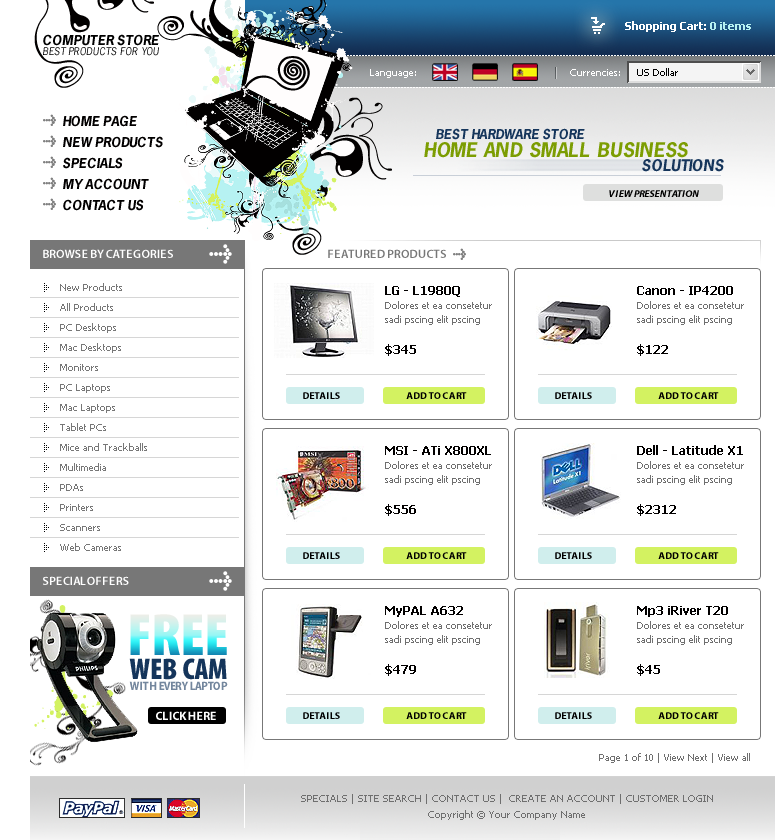
<style>
.page{position:relative;width:775px;height:840px;background:#ffffff}
.page>*{position:absolute;margin:0}
.t1{font:11px "Tahoma-Bold";color:#ffffff}
.t2{font:11px "Tahoma-Bold";color:#b6f2f2}
.t3{font:13px "NewsGothicStd-BoldOblique";color:#000000}
.t4{font:10px "NewsGothicStd-Oblique";color:#000000}
.t5{font:10px "Tahoma";color:#ffffff}
.t6{font:10px "Tahoma";color:#000000}
.t7{font:10px "MetaCondBlack-Expert";color:#7f7f7f}
.t8{font:13px "NewsGothicStd-BoldOblique";color:#020000}
.t9{font:13px "NewsGothicStd-BoldOblique";color:#15355b}
.t10{font:19px "NewsGothicStd-BoldOblique";color:#7c9d02}
.t11{font:15px "NewsGothicStd-BoldOblique";color:#15355b}
.t12{font:10px "MyriadPro-BoldIt";color:#000000}
.t13{font:18px "MetaCondBlack-Expert";color:#ffffff}
.t14{font:12px "MyriadPro-Semibold";color:#ffffff}
.t15{font:12px "MyriadPro-Semibold";color:#777777}
.t16{font:10px/20px "Tahoma";color:#777777}
.t17{font:10px/14px "Tahoma";color:#6f6f6f}
.t18{font:12px/14px "Tahoma-Bold";color:#020000}
.t19{font:12px "Tahoma-Bold";color:#020000}
.t20{font:10px "MyriadPro-Bold";color:#000000}
.t21{font:60px "MyriadPro-BlackCond"}
.t22{font:30px "MyriadPro-BlackCond";color:#15355b}
.t23{font:12px "MyriadPro-BoldSemiCn";letter-spacing:-0.02em;color:#73869d}
.t24{font:12px "MyriadPro-Bold";color:#ffffff}
.t25{font:10px "Tahoma";color:#6f6f6f}
.t26{font:10px "Tahoma";color:#6f6f6f;text-transform:uppercase}
</style>
<div class="page">
<p class="t1" style="left:625px;top:21px;width:126px;height:11px">Shopping Cart: <span class="t2">0 items</span></p>
<p class="t3" style="left:43px;top:34px;width:116px;height:12px">COMPUTER STORE</p>
<p class="t4" style="left:43px;top:47px;width:116px;height:9px">BEST PRODUCTS FOR YOU</p>
<p class="t5" style="left:370px;top:69px;width:46px;height:9px">Language:</p>
<p class="t5" style="left:570px;top:69px;width:50px;height:7px">Currencies:</p>
<p class="t6" style="left:637px;top:68px;width:41px;height:8px">US Dollar</p>
<p class="t7" style="left:43px;top:114px;width:13px;height:12px">l</p>
<p class="t8" style="left:63px;top:115px;width:74px;height:12px">HOME PAGE</p>
<p class="t7" style="left:43px;top:135px;width:13px;height:12px">l</p>
<p class="t8" style="left:63px;top:136px;width:100px;height:12px">NEW PRODUCTS</p>
<p class="t9" style="left:436px;top:128px;width:149px;height:12px">BEST HARDWARE STORE</p>
<p class="t10" style="left:424px;top:142px;width:264px;height:16px">HOME AND SMALL BUSINESS</p>
<p class="t7" style="left:43px;top:156px;width:13px;height:12px">l</p>
<p class="t8" style="left:63px;top:157px;width:60px;height:12px">SPECIALS</p>
<p class="t11" style="left:642px;top:159px;width:82px;height:13px">SOLUTIONS</p>
<p class="t7" style="left:43px;top:177px;width:13px;height:12px">l</p>
<p class="t8" style="left:63px;top:178px;width:86px;height:12px">MY ACCOUNT</p>
<p class="t7" style="left:43px;top:198px;width:13px;height:12px">l</p>
<p class="t12" style="left:609px;top:190px;width:90px;height:7px">VIEW PRESENTATION</p>
<p class="t8" style="left:63px;top:199px;width:81px;height:12px">CONTACT US</p>
<p class="t13" style="left:209px;top:244px;width:23px;height:20px">l</p>
<p class="t14" style="left:43px;top:249px;width:130px;height:9px">BROWSE BY CATEGORIES</p>
<p class="t15" style="left:328px;top:249px;width:118px;height:9px">FEATURED PRODUCTS</p>
<p class="t7" style="left:453px;top:248px;width:13px;height:12px">l</p>
<p class="t16" style="left:60px;top:283px;width:87px;height:268px">New Products<br>All Products<br>PC Desktops<br>Mac Desktops<br>Monitors<br>PC Laptops<br>Mac Laptops<br>Tablet PCs<br>Mice and Trackballs<br>Multimedia<br>PDAs<br>Printers<br>Scanners<br>Web Cameras</p>
<p class="t17" style="left:385px;top:286px;width:107px;height:39px"><span class="t18">LG - L1980Q<br></span>Dolores et ea consetetur sadi pscing elit pscing</p>
<p class="t17" style="left:637px;top:286px;width:107px;height:39px"><span class="t18">Canon - IP4200<br></span>Dolores et ea consetetur sadi pscing elit pscing</p>
<p class="t19" style="left:385px;top:344px;width:31px;height:12px">$345</p>
<p class="t19" style="left:637px;top:344px;width:31px;height:12px">$122</p>
<p class="t20" style="left:303px;top:392px;width:37px;height:7px">DETAILS</p>
<p class="t20" style="left:406px;top:392px;width:61px;height:7px">ADD TO CART</p>
<p class="t20" style="left:555px;top:392px;width:37px;height:7px">DETAILS</p>
<p class="t20" style="left:658px;top:392px;width:61px;height:7px">ADD TO CART</p>
<p class="t17" style="left:385px;top:446px;width:107px;height:39px"><span class="t18">MSI - ATi X800XL <br></span>Dolores et ea consetetur sadi pscing elit pscing</p>
<p class="t17" style="left:637px;top:445px;width:107px;height:40px"><span class="t18">Dell - Latitude X1<br></span>Dolores et ea consetetur sadi pscing elit pscing</p>
<p class="t19" style="left:385px;top:504px;width:31px;height:12px">$556</p>
<p class="t19" style="left:637px;top:504px;width:39px;height:12px">$2312</p>
<p class="t20" style="left:303px;top:552px;width:37px;height:7px">DETAILS</p>
<p class="t20" style="left:406px;top:552px;width:61px;height:7px">ADD TO CART</p>
<p class="t20" style="left:555px;top:552px;width:37px;height:7px">DETAILS</p>
<p class="t20" style="left:658px;top:552px;width:61px;height:7px">ADD TO CART</p>
<p class="t14" style="left:43px;top:576px;width:86px;height:9px">SPECIAL OFFERS</p>
<p class="t13" style="left:209px;top:571px;width:23px;height:20px">l</p>
<p class="t17" style="left:385px;top:606px;width:107px;height:39px"><span class="t18">MyPAL A632<br></span>Dolores et ea consetetur sadi pscing elit pscing</p>
<p class="t17" style="left:637px;top:606px;width:107px;height:39px"><span class="t18">Mp3 iRiver T20<br></span>Dolores et ea consetetur sadi pscing elit pscing</p>
<p class="t21" style="left:130px;top:614px;width:97px;height:41px">FREE</p>
<p class="t22" style="left:129px;top:658px;width:98px;height:22px">WEB CAM</p>
<p class="t19" style="left:385px;top:664px;width:31px;height:12px">$479</p>
<p class="t19" style="left:637px;top:664px;width:23px;height:12px">$45</p>
<p class="t23" style="left:129px;top:681px;width:99px;height:9px">WITH  EVERY LAPTOP</p>
<p class="t24" style="left:156px;top:711px;width:60px;height:9px">CLICK HERE</p>
<p class="t20" style="left:303px;top:712px;width:37px;height:7px">DETAILS</p>
<p class="t20" style="left:406px;top:712px;width:61px;height:7px">ADD TO CART</p>
<p class="t20" style="left:555px;top:712px;width:37px;height:7px">DETAILS</p>
<p class="t20" style="left:658px;top:712px;width:61px;height:7px">ADD TO CART</p>
<p class="t25" style="left:599px;top:753px;width:151px;height:10px">Page 1 of 10 | View Next | View all</p>
<p class="t26" style="left:301px;top:794px;width:412px;height:10px">Specials | Site Search | Contact Us |  Create an Account | Customer Login</p>
<p class="t25" style="left:428px;top:810px;width:157px;height:10px">Copyright © Your Company Name</p>
</div>
